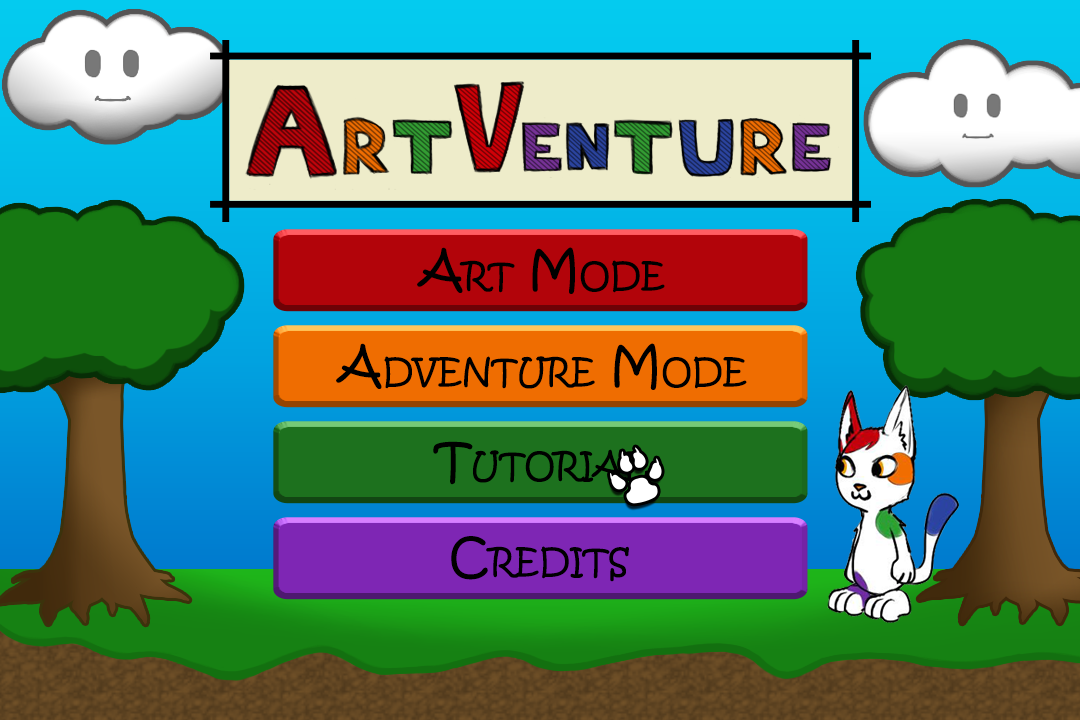
<style>
.page{position:relative;width:1080px;height:720px}
.page>*{position:absolute;margin:0}
.t1{font:48.6px "KristenITC-Regular";color:#000000;font-variant:small-caps}
</style>
<div class="page">
<p class="t1" style="left:417px;top:247px;width:248px;height:47px">Art Mode</p>
<p class="t1" style="left:336px;top:343px;width:411px;height:47px">Adventure Mode</p>
<p class="t1" style="left:433px;top:441px;width:216px;height:44px">Tutorial</p>
<p class="t1" style="left:451px;top:536px;width:178px;height:46px">Credits</p>
</div>
